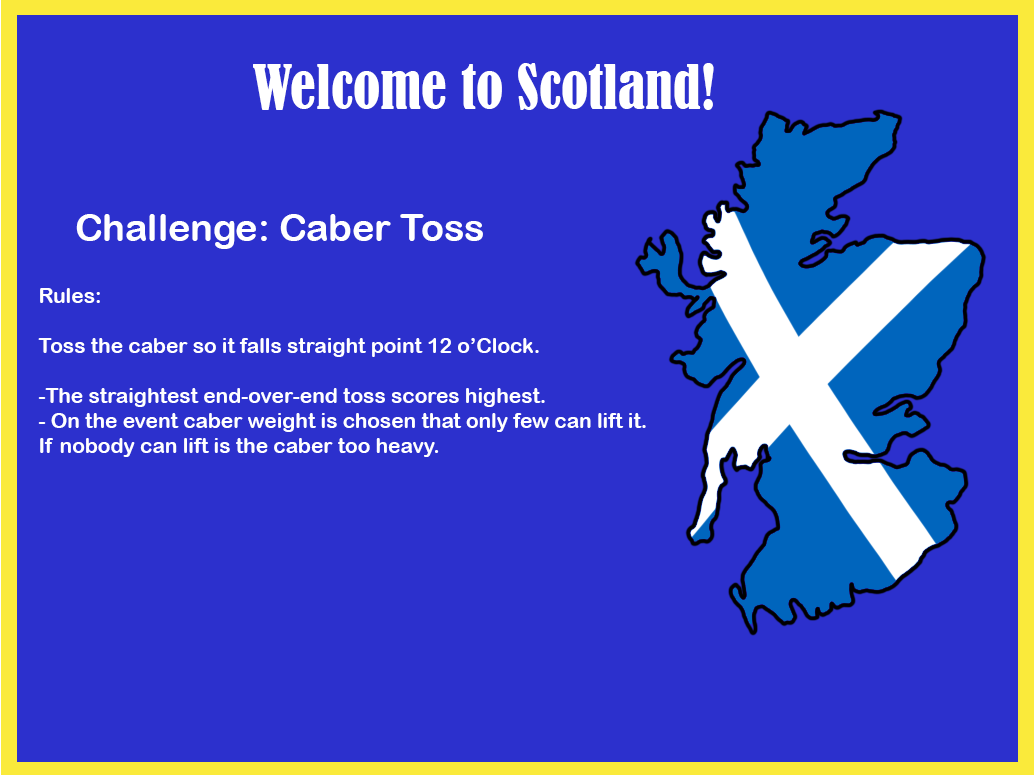
<style>
.page{position:relative;width:1035px;height:775px;background:#2c30cd}
.page>*{position:absolute;margin:0}
.t1{font:56.9px "BernardMT-Condensed";color:#ffffff}
.t2{font:37.5px "ArialRoundedMTBold";color:#ffffff}
.t3{font:20.9px "ArialRoundedMTBold";color:#ffffff}
</style>
<div class="page">
<p class="t1" style="left:253px;top:63px;width:461px;height:47px">Welcome to Scotland!</p>
<p class="t2" style="left:76px;top:214px;width:407px;height:35px">Challenge: Caber Toss</p>
<p class="t3" style="left:38px;top:288px;width:608px;height:169px">Rules:<br><br>Toss the caber so it falls straight point 12 o’Clock.<br><br>-The straightest end-over-end toss scores highest.<br>- On the event caber weight is chosen that only few can lift it. <br>If nobody can lift is the caber too heavy.</p>
</div>
